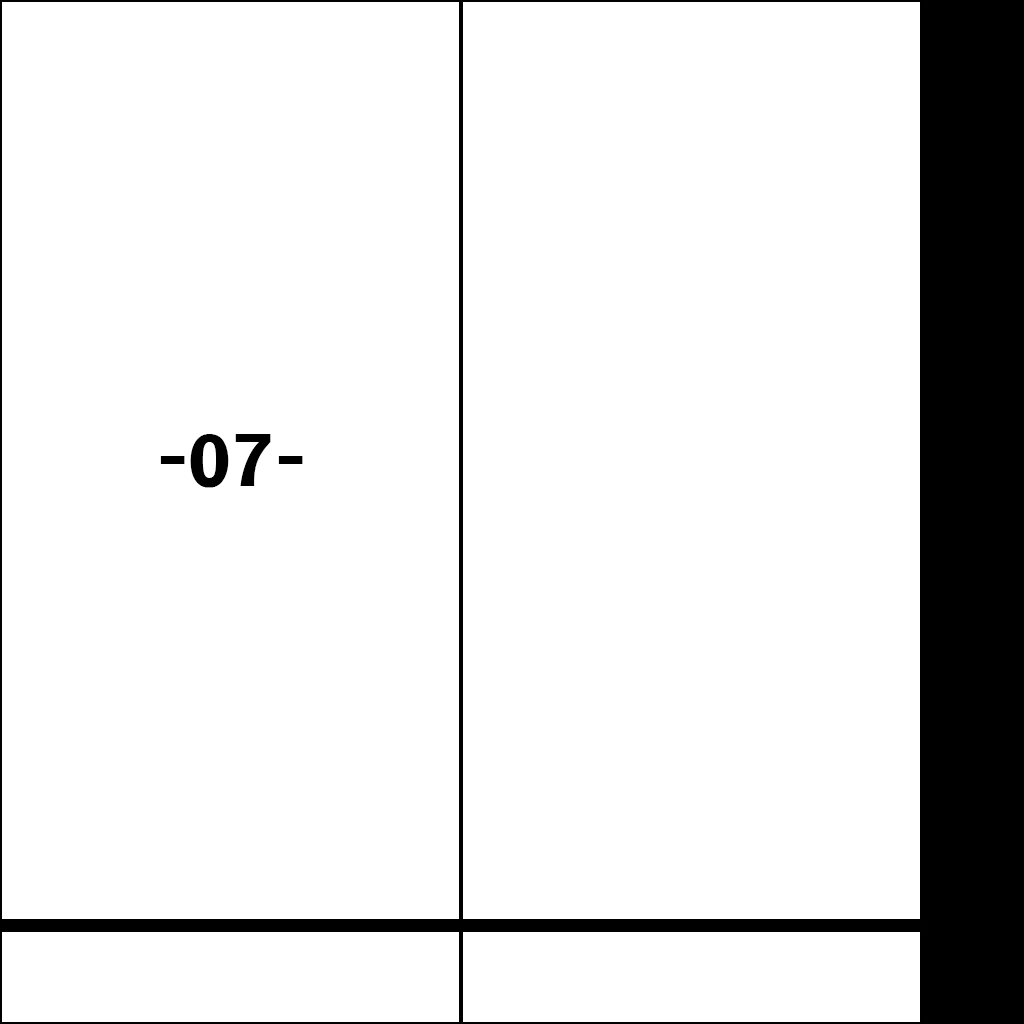
<style>
.page{position:relative;width:1024px;height:1024px;background:#ffffff}
.page>*{position:absolute;margin:0}
.t1{font:60px "HeadlineR-HM";color:#000000}
</style>
<div class="page">
<p class="t1" style="left:160px;top:434px;width:143px;height:54px">-07-</p>
</div>
